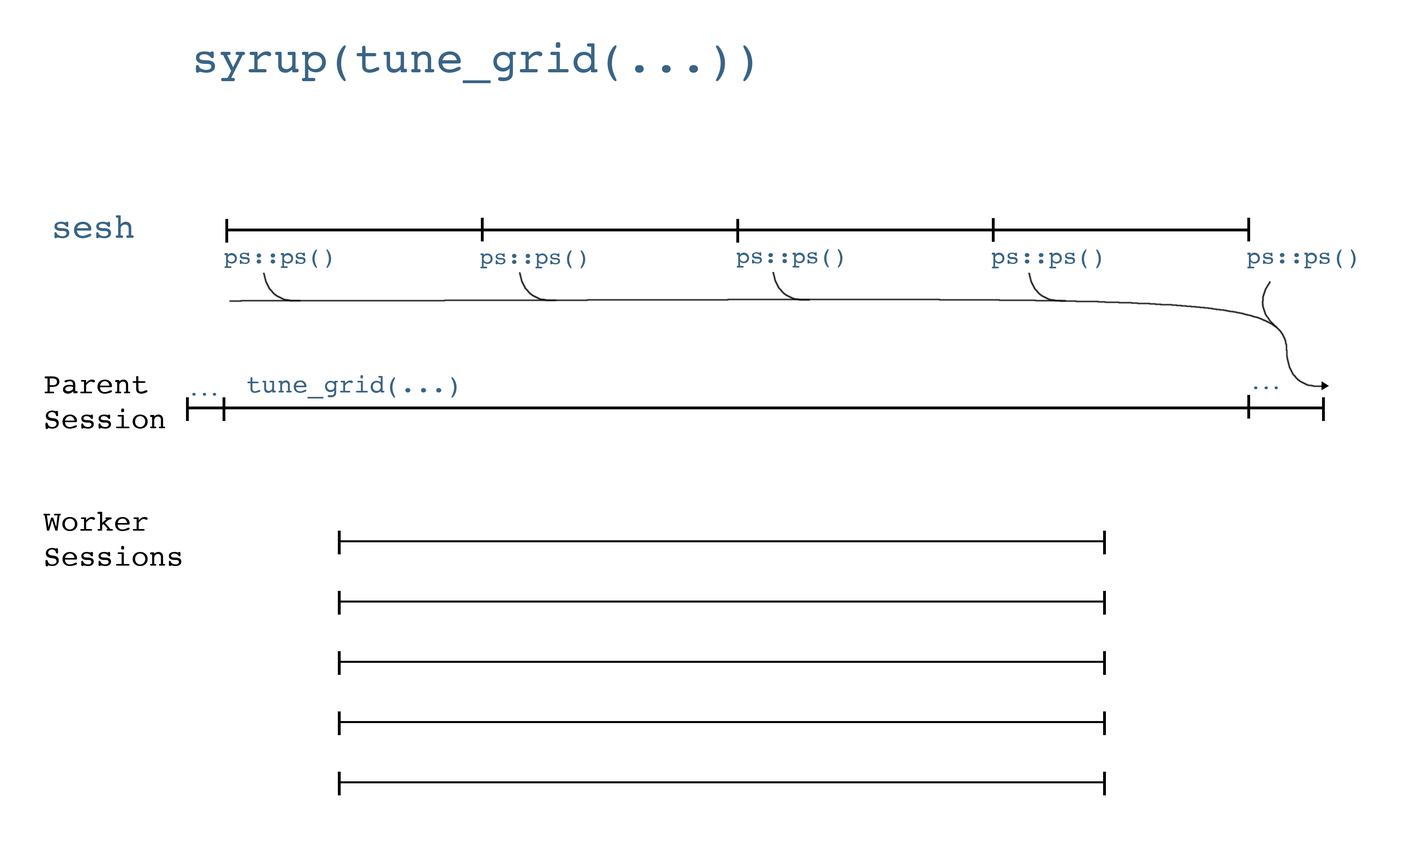
<style>
.page{position:relative;width:1406px;height:848px;background:#ffffff}
.page>*{position:absolute;margin:0}
.t1{font:45.2px "Courier";color:#396486}
.t2{font:34.8px "Courier";color:#396486}
.t3{font:23.3px "Courier";color:#396486}
.t4{font:22.9px "Courier";color:#396486}
.t5{font:23.1px "Courier";color:#396486}
.t6{font:23.9px "Courier";color:#396486}
.t7{font:23.7px "Courier";color:#396486}
.t8{font:29.2px "Courier";color:#000000}
.t9{font:25.7px "Courier";color:#396486}
.t10{font:17.1px "Courier";color:#396486}
</style>
<div class="page">
<p class="t1" style="left:196px;top:42px;width:556px;height:41px">syrup(tune_grid(...))</p>
<p class="t2" style="left:54px;top:215px;width:80px;height:23px">sesh</p>
<p class="t3" style="left:224px;top:249px;width:107px;height:19px">ps::ps()</p>
<p class="t4" style="left:480px;top:250px;width:105px;height:18px">ps::ps()</p>
<p class="t5" style="left:736px;top:249px;width:107px;height:19px">ps::ps()</p>
<p class="t6" style="left:991px;top:249px;width:110px;height:19px">ps::ps()</p>
<p class="t7" style="left:1247px;top:249px;width:109px;height:19px">ps::ps()</p>
<p class="t8" style="left:45px;top:376px;width:120px;height:53px">Parent <br>Session</p>
<p class="t9" style="left:247px;top:375px;width:210px;height:24px">tune_grid(...)</p>
<p class="t10" style="left:1254px;top:386px;width:24px;height:3px">...</p>
<p class="t10" style="left:192px;top:393px;width:24px;height:3px">...</p>
<p class="t8" style="left:43px;top:512px;width:139px;height:54px">Worker<br>Sessions</p>
</div>
